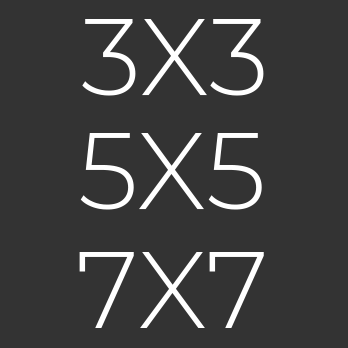
<style>
.page{position:relative;width:348px;height:348px;background:#333333}
.page>*{position:absolute;margin:0}
.t1{font:107.6px "Montserrat-Light";color:#ffffff}
</style>
<div class="page">
<p class="t1" style="left:82px;top:19px;width:182px;height:77px">3X3</p>
<p class="t1" style="left:80px;top:133px;width:182px;height:77px">5X5</p>
<p class="t1" style="left:79px;top:252px;width:185px;height:76px">7X7</p>
</div>
